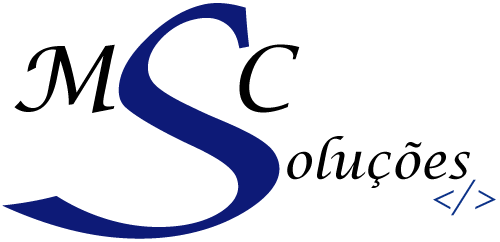
<style>
.page{position:relative;width:500px;height:242px;background:#ffffff}
.page>*{position:absolute;margin:0}
.t1{font:300px "LucidaCalligraphy-Italic";color:#0d1a77}
.t2{font:90px "LucidaCalligraphy-Italic";color:#000000}
.t3{font:50px "LucidaCalligraphy-Italic";color:#000000}
.t4{font:36px "LucidaCalligraphy-Italic";color:#0c3288}
</style>
<div class="page">
<p class="t1" style="left:2px;top:3px;width:278px;height:236px">S</p>
<p class="t2" style="left:14px;top:44px;width:101px;height:69px">M</p>
<p class="t2" style="left:239px;top:44px;width:61px;height:69px">C</p>
<p class="t3" style="left:287px;top:136px;width:183px;height:52px">oluções</p>
<p class="t4" style="left:433px;top:179px;width:63px;height:37px">&lt;/&gt;</p>
</div>
